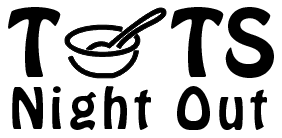
<style>
.page{position:relative;width:282px;height:138px;background:#ffffff}
.page>*{position:absolute;margin:0}
.t1{font:83.3px "HoboStd";color:#000000}
.t2{font:50px "HoboStd";letter-spacing:0.1em;color:#000000}
</style>
<div class="page">
<p class="t1" style="left:8px;top:7px;width:266px;height:71px">T     TS</p>
<p class="t2" style="left:12px;top:86px;width:255px;height:44px">Night Out</p>
</div>
